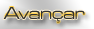
<style>
.page{position:relative;width:94px;height:29px}
.page>*{position:absolute;margin:0}
.t1{font:18px "MicrogrammaD-MediExte";color:#313131}
</style>
<div class="page">
<p class="t1" style="left:3px;top:7px;width:82px;height:16px">Avançar</p>
</div>
